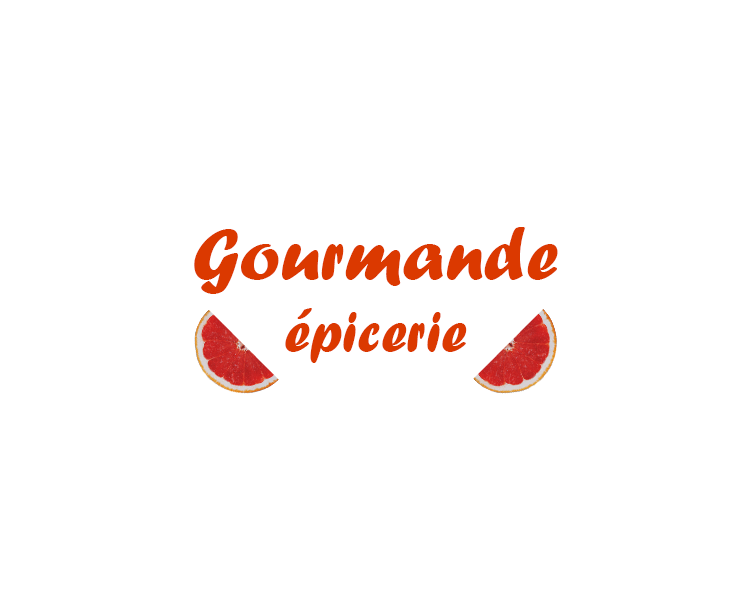
<style>
.page{position:relative;width:750px;height:600px;background:#ffffff}
.page>*{position:absolute;margin:0}
.t1{font:75px "ForteMT";color:#db3900}
.t2{font:60px "ForteMT";color:#db3900}
</style>
<div class="page">
<p class="t1" style="left:194px;top:227px;width:364px;height:136px;text-align:center"><span class="t2"><br></span>Gourmande<br><span class="t2"> épicerie</span></p>
</div>
